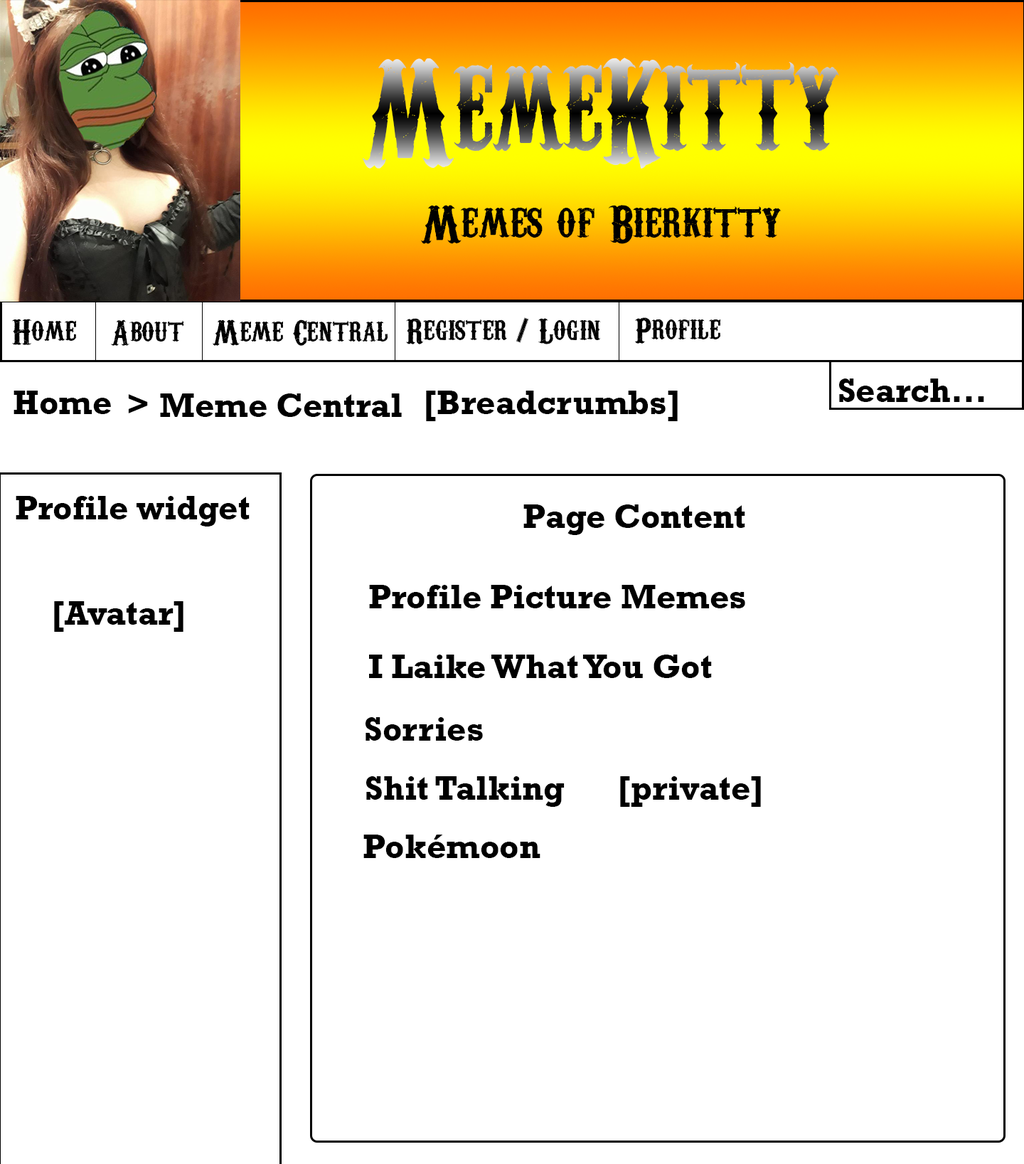
<style>
.page{position:relative;width:1024px;height:1164px;background:#ffffff}
.page>*{position:absolute;margin:0}
.t1{font:146.2px "CarnivaleeFreakshow";scale:0.79 1}
.t2{font:51.2px "CarnivaleeFreakshow";color:#000000}
.t3{font:34.1px "CarnivaleeFreakshow";color:#000000}
.t4{font:34.1px "Rockwell-Bold";color:#000000}
</style>
<div class="page">
<p class="t1" style="left:363px;top:58px;width:477px;height:111px">MemeKitty</p>
<p class="t2" style="left:421px;top:205px;width:361px;height:39px">Memes of Bierkitty</p>
<p class="t3" style="left:406px;top:317px;width:195px;height:27px">Register / Login</p>
<p class="t3" style="left:635px;top:317px;width:86px;height:27px">Profile</p>
<p class="t3" style="left:12px;top:319px;width:64px;height:26px">Home</p>
<p class="t3" style="left:111px;top:319px;width:73px;height:27px">About</p>
<p class="t3" style="left:213px;top:319px;width:175px;height:27px">Meme Central</p>
<p class="t4" style="left:840px;top:378px;width:145px;height:24px">Search...</p>
<p class="t4" style="left:14px;top:391px;width:97px;height:23px">Home</p>
<p class="t4" style="left:128px;top:394px;width:20px;height:19px">&gt;</p>
<p class="t4" style="left:160px;top:393px;width:242px;height:24px">Meme Central</p>
<p class="t4" style="left:426px;top:391px;width:252px;height:30px">[Breadcrumbs]</p>
<p class="t4" style="left:16px;top:496px;width:234px;height:30px">Profile widget</p>
<p class="t4" style="left:524px;top:504px;width:222px;height:31px">Page Content</p>
<p class="t4" style="left:369px;top:585px;width:377px;height:23px">Profile Picture Memes</p>
<p class="t4" style="left:54px;top:601px;width:130px;height:31px">[Avatar]</p>
<p class="t4" style="left:369px;top:655px;width:343px;height:23px">I Laike What You Got</p>
<p class="t4" style="left:366px;top:717px;width:117px;height:24px">Sorries</p>
<p class="t4" style="left:366px;top:776px;width:199px;height:31px">Shit Talking</p>
<p class="t4" style="left:620px;top:776px;width:141px;height:31px">[private]</p>
<p class="t4" style="left:364px;top:835px;width:177px;height:23px">Pokémoon</p>
</div>
